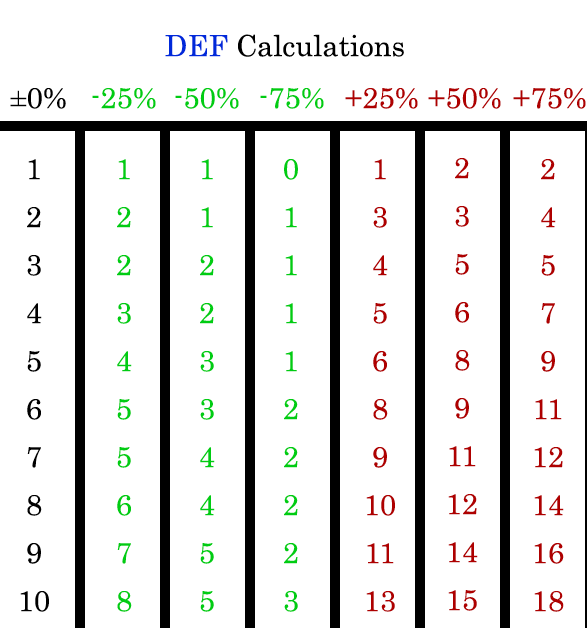
<style>
.page{position:relative;width:587px;height:628px;background:#ffffff}
.page>*{position:absolute;margin:0}
.t1{font:50px "Century";color:#000000}
.t2{font:50px "Century";color:#0029da}
.t3{font:50px "Century";color:#00cc13}
.t4{font:50px "Century";color:#ae0000}
.t5{font:50px/48px "Century";color:#000000}
.t6{font:50px/10px "Century";color:#000000}
.t7{font:50px/48px "Century";color:#00cc13}
.t8{font:50px/10px "Century";color:#00cc13}
.t9{font:50px/48px "Century";color:#ae0000}
.t10{font:50px/10px "Century";color:#ae0000}
</style>
<div class="page">
<p class="t1" style="left:165px;top:34px;width:239px;height:23px"><span class="t2">DEF</span> Calculations</p>
<p class="t1" style="left:10px;top:88px;width:56px;height:21px">±0%</p>
<p class="t3" style="left:92px;top:88px;width:64px;height:21px">-25%</p>
<p class="t3" style="left:175px;top:88px;width:64px;height:21px">-50%</p>
<p class="t3" style="left:260px;top:88px;width:64px;height:21px">-75%</p>
<p class="t4" style="left:345px;top:88px;width:73px;height:21px">+25%</p>
<p class="t4" style="left:428px;top:88px;width:73px;height:21px">+50%</p>
<p class="t4" style="left:513px;top:88px;width:73px;height:21px">+75%</p>
<p class="t5" style="left:20px;top:159px;width:29px;height:453px;text-align:center"><span class="t6">1<br></span>2<br>3<br>4<br>5<br>6<br>7<br>8<br>9<br>10</p>
<p class="t7" style="left:117px;top:159px;width:15px;height:453px;text-align:center"><span class="t8">1<br></span>2<br>2<br>3<br>4<br>5<br>5<br>6<br>7<br>8</p>
<p class="t7" style="left:200px;top:159px;width:15px;height:453px;text-align:center"><span class="t8">1<br></span>1<br>2<br>2<br>3<br>3<br>4<br>4<br>5<br>5</p>
<p class="t7" style="left:284px;top:159px;width:14px;height:453px;text-align:center"><span class="t8">0<br></span>1<br>1<br>1<br>1<br>2<br>2<br>2<br>2<br>3</p>
<p class="t9" style="left:366px;top:159px;width:29px;height:453px;text-align:center"><span class="t10">1<br></span>3<br>4<br>5<br>6<br>8<br>9<br>10<br>11<br>13</p>
<p class="t9" style="left:448px;top:158px;width:30px;height:453px;text-align:center"><span class="t10">2<br></span>3<br>5<br>6<br>8<br>9<br>11<br>12<br>14<br>15</p>
<p class="t9" style="left:534px;top:159px;width:30px;height:453px;text-align:center"><span class="t10">2<br></span>4<br>5<br>7<br>9<br>11<br>12<br>14<br>16<br>18</p>
</div>
